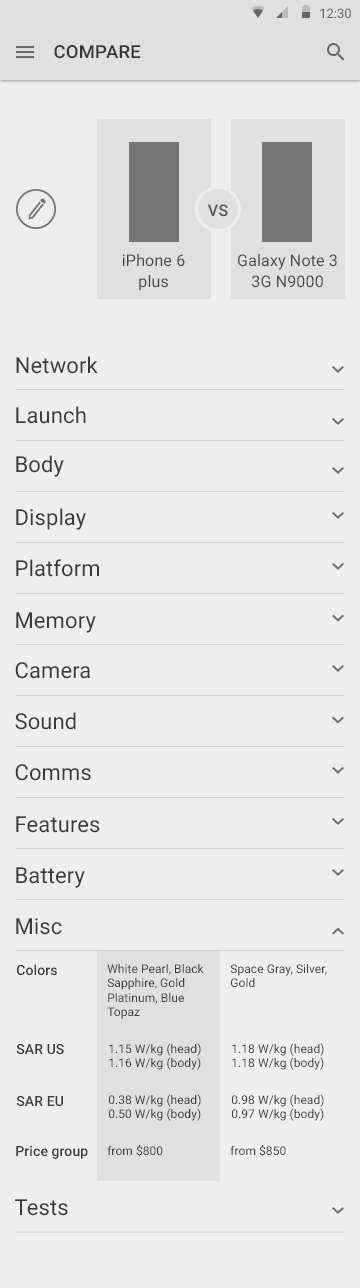
<style>
.page{position:relative;width:360px;height:1288px;background:#eeeeee}
.page>*{position:absolute;margin:0}
.t1{font:18px "Roboto-Medium";letter-spacing:0.01em;color:#373737}
.t2{font:16px "Roboto-Medium";letter-spacing:0.01em;color:#555555}
.t3{font:16px/21px "Roboto-Regular";letter-spacing:0.01em;color:#4b4b4b}
.t4{font:22px "Roboto-Regular";letter-spacing:0.005em;color:#3b3b3b}
.t5{font:14px "Roboto-Medium";letter-spacing:0.005em;color:#3b3b3b}
.t6{font:12px "Roboto-Regular";letter-spacing:0.005em;color:#3b3b3b}
</style>
<div class="page">
<p class="t1" style="left:54px;top:45px;width:87px;height:14px">COMPARE</p>
<p class="t2" style="left:208px;top:204px;width:20px;height:13px">VS</p>
<p class="t3" style="left:122px;top:254px;width:63px;height:37px;text-align:center">iPhone 6<br>plus</p>
<p class="t3" style="left:238px;top:254px;width:99px;height:34px;text-align:center">Galaxy Note 3<br>3G N9000</p>
<p class="t4" style="left:16px;top:356px;width:82px;height:18px">Network</p>
<p class="t4" style="left:16px;top:406px;width:70px;height:18px">Launch</p>
<p class="t4" style="left:16px;top:455px;width:48px;height:22px">Body</p>
<p class="t4" style="left:16px;top:508px;width:70px;height:22px">Display</p>
<p class="t4" style="left:16px;top:559px;width:83px;height:18px">Platform</p>
<p class="t4" style="left:16px;top:612px;width:80px;height:21px">Memory</p>
<p class="t4" style="left:15px;top:662px;width:75px;height:17px">Camera</p>
<p class="t4" style="left:15px;top:712px;width:61px;height:18px">Sound</p>
<p class="t4" style="left:15px;top:764px;width:76px;height:17px">Comms</p>
<p class="t4" style="left:16px;top:816px;width:84px;height:17px">Features</p>
<p class="t4" style="left:16px;top:867px;width:69px;height:21px">Battery</p>
<p class="t4" style="left:16px;top:918px;width:46px;height:17px">Misc</p>
<p class="t5" style="left:17px;top:964px;width:40px;height:12px">Colors</p>
<p class="t6" style="left:107px;top:964px;width:97px;height:55px">White Pearl, Black Sapphire, Gold Platinum, Blue Topaz</p>
<p class="t6" style="left:230px;top:964px;width:97px;height:23px">Space Gray, Silver, Gold</p>
<p class="t5" style="left:16px;top:1044px;width:48px;height:11px">SAR US</p>
<p class="t6" style="left:109px;top:1043px;width:92px;height:27px">1.15 W/kg (head)     1.16 W/kg (body)</p>
<p class="t6" style="left:232px;top:1043px;width:92px;height:27px">1.18 W/kg (head)     1.18 W/kg (body)</p>
<p class="t5" style="left:16px;top:1096px;width:47px;height:11px">SAR EU</p>
<p class="t6" style="left:109px;top:1094px;width:92px;height:27px">0.38 W/kg (head)     0.50 W/kg (body)</p>
<p class="t6" style="left:232px;top:1094px;width:92px;height:27px">0.98 W/kg (head)     0.97 W/kg (body)</p>
<p class="t5" style="left:16px;top:1145px;width:72px;height:14px">Price group</p>
<p class="t6" style="left:107px;top:1145px;width:56px;height:12px">from $800</p>
<p class="t6" style="left:230px;top:1145px;width:56px;height:12px">from $850</p>
<p class="t4" style="left:15px;top:1199px;width:53px;height:17px">Tests</p>
</div>
